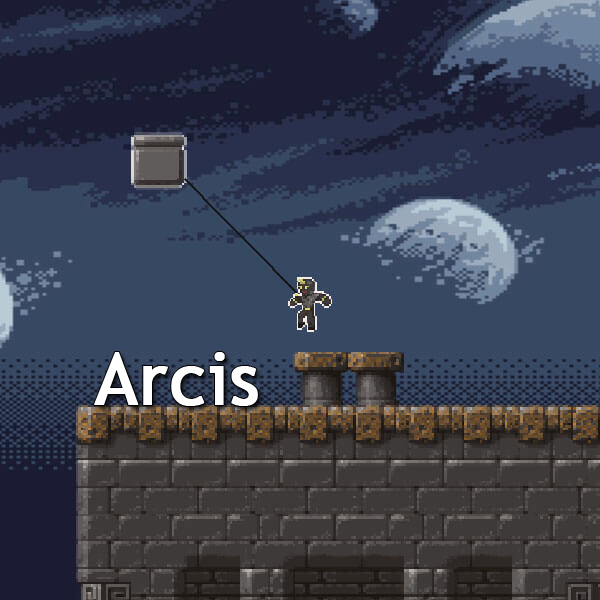
<style>
.page{position:relative;width:600px;height:600px}
.page>*{position:absolute;margin:0}
.t1{font:72px "TrebuchetMS";letter-spacing:0.005em;color:#ffffff;font-weight:bold}
</style>
<div class="page">
<p class="t1" style="left:94px;top:352px;width:164px;height:54px">Arcis</p>
</div>
